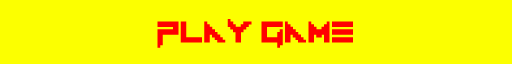
<style>
.page{position:relative;width:512px;height:64px;background:#fcff00}
.page>*{position:absolute;margin:0}
.t1{font:41.7px "Vermin-Vibes-1989";color:#ff0000}
</style>
<div class="page">
<p class="t1" style="left:157px;top:19px;width:196px;height:29px">Play Game</p>
</div>
